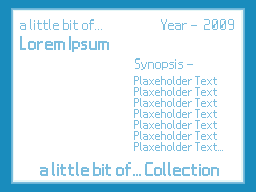
<style>
.page{position:relative;width:256px;height:192px;background:#ffffff}
.page>*{position:absolute;margin:0}
.t1{font:19px "Nintendo-DS-BIOS";color:#7bbdde}
.t2{font:20px "Nintendo-DS-BIOS";color:#7bbdde}
.t3{font:24px "Nintendo-DS-BIOS";color:#7bbdde}
.t4{font:16px/11px "Nintendo-DS-BIOS";color:#7bbdde}
</style>
<div class="page">
<p class="t1" style="left:20px;top:19px;width:82px;height:11px">a little bit of...</p>
<p class="t1" style="left:161px;top:19px;width:36px;height:11px">Year -</p>
<p class="t2" style="left:204px;top:19px;width:30px;height:11px">2009</p>
<p class="t3" style="left:20px;top:36px;width:89px;height:16px">Lorem Ipsum</p>
<p class="t1" style="left:135px;top:58px;width:58px;height:12px">Synopsis -</p>
<p class="t4" style="left:134px;top:76px;width:89px;height:75px">Plaxeholder Text<br>Plaxeholder Text<br>Plaxeholder Text<br>Plaxeholder Text<br>Plaxeholder Text<br>Plaxeholder Text<br>Plaxeholder Text...</p>
<p class="t3" style="left:40px;top:162px;width:179px;height:14px">a little bit of... Collection</p>
</div>
